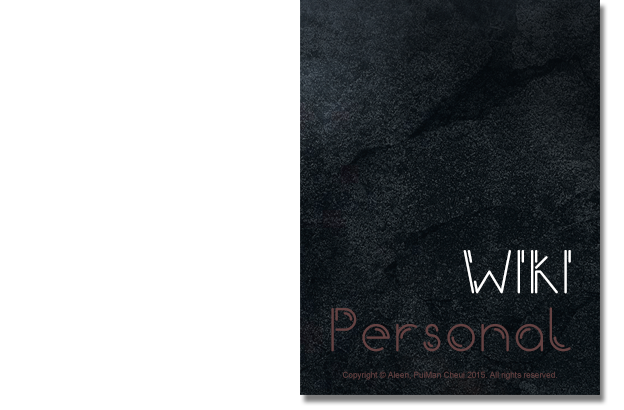
<style>
.page{position:relative;width:624px;height:410px;background:#ffffff}
.page>*{position:absolute;margin:0}
.t1{font:72.3px "Iron";color:#ffffff}
.t2{font:72.3px "Iron";color:#644242}
.t3{font:8.2px "ArialMT";color:#644242}
</style>
<div class="page">
<p class="t1" style="left:463px;top:250px;width:108px;height:44px">WIKI</p>
<p class="t2" style="left:331px;top:307px;width:240px;height:45px">Personal</p>
<p class="t3" style="left:343px;top:371px;width:214px;height:9px">Copyright © Aleen, PuiMan Cheui 2015. All rights reserved.</p>
</div>
